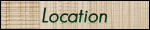
<style>
.page{position:relative;width:150px;height:30px}
.page>*{position:absolute;margin:0}
.t1{font:20px "GeosansLight-Oblique";color:#003516;font-weight:bold}
</style>
<div class="page">
<p class="t1" style="left:42px;top:7px;width:66px;height:16px">Location</p>
</div>
